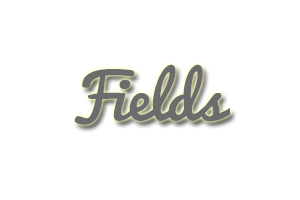
<style>
.page{position:relative;width:300px;height:200px;background:#ffffff}
.page>*{position:absolute;margin:0}
.t1{font:60px "Pacifico-Regular";color:#6c6c6c}
</style>
<div class="page">
<p class="t1" style="left:74px;top:64px;width:156px;height:61px">Fields</p>
</div>
